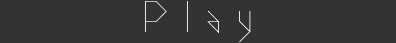
<style>
.page{position:relative;width:396px;height:43px;background:#333333}
.page>*{position:absolute;margin:0}
.t1{font:43.4px "Stick-Light";color:#ffffff}
</style>
<div class="page">
<p class="t1" style="left:145px;top:1px;width:106px;height:41px">Play</p>
</div>
